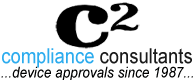
<style>
.page{position:relative;width:195px;height:80px;background:#ffffff}
.page>*{position:absolute;margin:0}
.t1{font:20.7px "ArialMT";color:#1b1b1b;scale:0.89 1}
.t2{font:20.7px "ArialMT";color:#2dacee;scale:0.89 1}
.t3{font:15.1px "Arial-ItalicMT";color:#000101;scale:0.9 1}
</style>
<div class="page">
<p class="t1" style="left:2px;top:48px;width:190px;height:20px"><span class="t2">compliance </span>consultants</p>
<p class="t3" style="left:1px;top:66px;width:192px;height:14px">...device approvals since 1987...</p>
</div>
